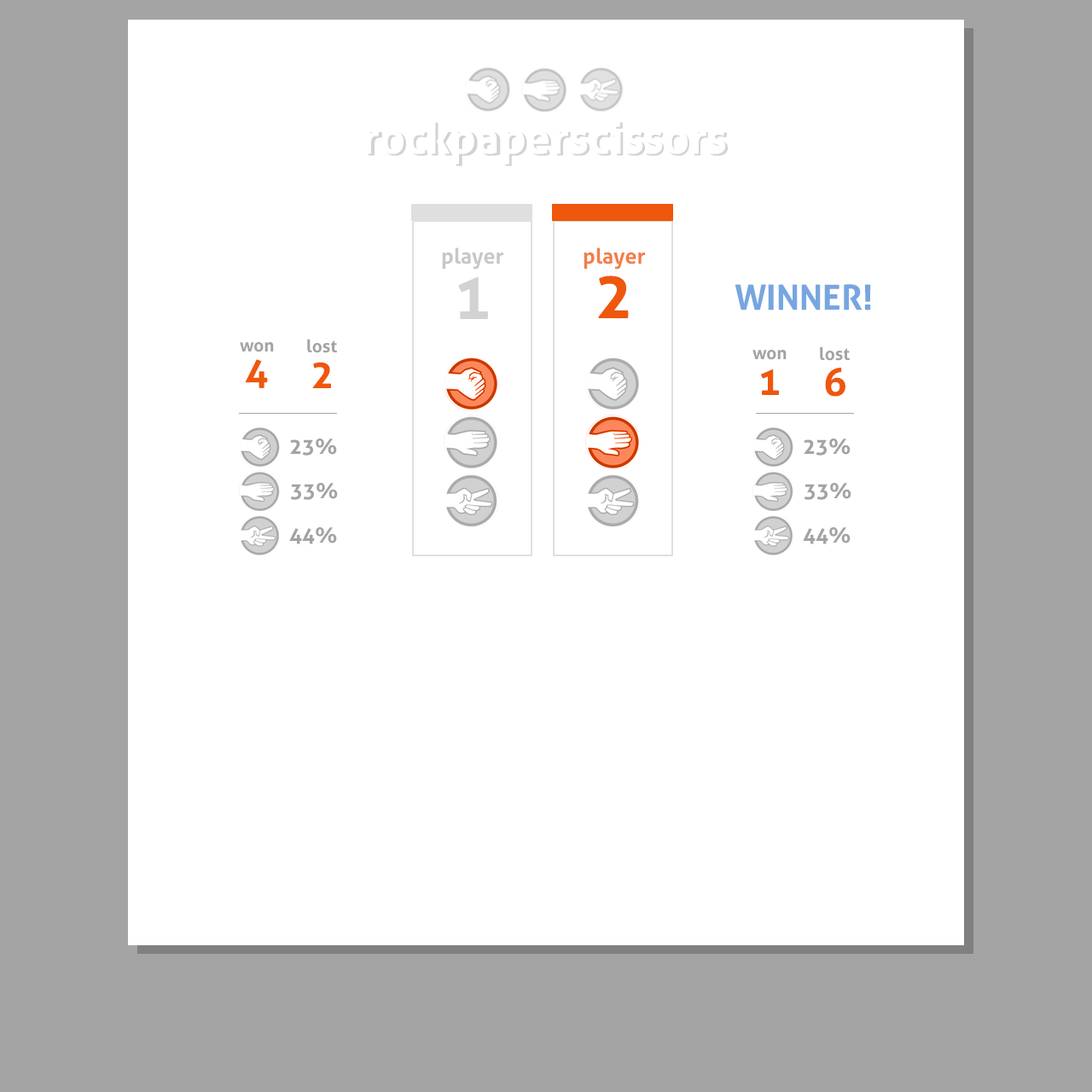
<style>
.page{position:relative;width:1092px;height:1092px;background:#ffffff}
.page>*{position:absolute;margin:0}
.t1{font:44.4px "Aller-Bold"}
.t2{font:21.3px "Aller-Bold";color:#c7c7c7}
.t3{font:21.3px "Aller-Bold";color:#f37e48}
.t4{font:64px "Aller-Bold";color:#d2d2d2}
.t5{font:64px "Aller-Bold";color:#ef570c}
.t6{font:34.7px "Aller-Bold";color:#77a6df}
.t7{font:17.6px "Aller-Bold";color:#a3a3a3}
.t8{font:39.1px "Aller-Bold";color:#ef570c}
.t9{font:21.3px "Aller-Bold";color:#a3a3a3}
</style>
<div class="page">
<p class="t1" style="left:368px;top:122px;width:360px;height:44px">rockpaperscissors</p>
<p class="t2" style="left:442px;top:247px;width:61px;height:23px">player</p>
<p class="t3" style="left:584px;top:247px;width:61px;height:23px">player</p>
<p class="t4" style="left:458px;top:277px;width:30px;height:42px">1</p>
<p class="t5" style="left:598px;top:276px;width:31px;height:42px">2</p>
<p class="t6" style="left:735px;top:284px;width:136px;height:27px">WINNER!</p>
<p class="t7" style="left:307px;top:339px;width:30px;height:14px">lost</p>
<p class="t7" style="left:240px;top:342px;width:34px;height:10px">won</p>
<p class="t7" style="left:752px;top:350px;width:35px;height:10px">won</p>
<p class="t7" style="left:820px;top:346px;width:30px;height:15px">lost</p>
<p class="t8" style="left:245px;top:359px;width:23px;height:29px">4</p>
<p class="t8" style="left:312px;top:362px;width:19px;height:26px">2</p>
<p class="t8" style="left:760px;top:369px;width:19px;height:26px">1</p>
<p class="t8" style="left:825px;top:367px;width:20px;height:30px">6</p>
<p class="t9" style="left:291px;top:483px;width:47px;height:17px">33%</p>
<p class="t9" style="left:804px;top:483px;width:47px;height:17px">33%</p>
<p class="t9" style="left:289px;top:527px;width:48px;height:17px">44%</p>
<p class="t9" style="left:803px;top:527px;width:48px;height:17px">44%</p>
</div>
